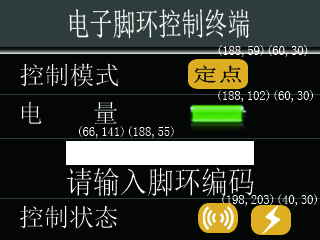
<style>
.page{position:relative;width:320px;height:240px;background:#040606}
.page>*{position:absolute;margin:0}
.t1{font:31.9px "SimSun";color:#ffffff;scale:0.72 1}
.t2{font:12.5px "SimSun";color:#ffffff}
.t3{font:25px "SimSun";color:#ffffff}
.t4{font:18.8px "SimSun";color:#050607;scale:1.35 1}
.t5{font:24.9px "SimSun";color:#ffffff}
.t6{font:30.9px "SimSun";color:#ffffff;scale:0.87 1}
</style>
<div class="page">
<p class="t1" style="left:69px;top:9px;width:181px;height:30px">电子脚环控制终端</p>
<p class="t2" style="left:218px;top:45px;width:90px;height:12px">(188,59)(60,30)</p>
<p class="t3" style="left:20px;top:63px;width:99px;height:24px">控制模式</p>
<p class="t4" style="left:194px;top:65px;width:47px;height:18px">定点</p>
<p class="t5" style="left:21px;top:101px;width:96px;height:23px">电    量</p>
<p class="t2" style="left:218px;top:90px;width:95px;height:12px">(188,102)(60,30)</p>
<p class="t2" style="left:78px;top:126px;width:96px;height:12px">(66,141)(188,55)</p>
<p class="t6" style="left:66px;top:167px;width:188px;height:30px">请输入脚环编码</p>
<p class="t2" style="left:222px;top:194px;width:95px;height:12px">(198,203)(40,30)</p>
<p class="t5" style="left:20px;top:205px;width:98px;height:24px">控制状态</p>
</div>
